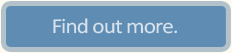
<style>
.page{position:relative;width:232px;height:53px;background:#5e8cb3}
.page>*{position:absolute;margin:0}
.t1{font:21.6px "Calibri";letter-spacing:-0.04em;color:#d7e2ec;scale:1.07 1}
</style>
<div class="page">
<p class="t1" style="left:53px;top:18px;width:124px;height:16px">Find out more.</p>
</div>
